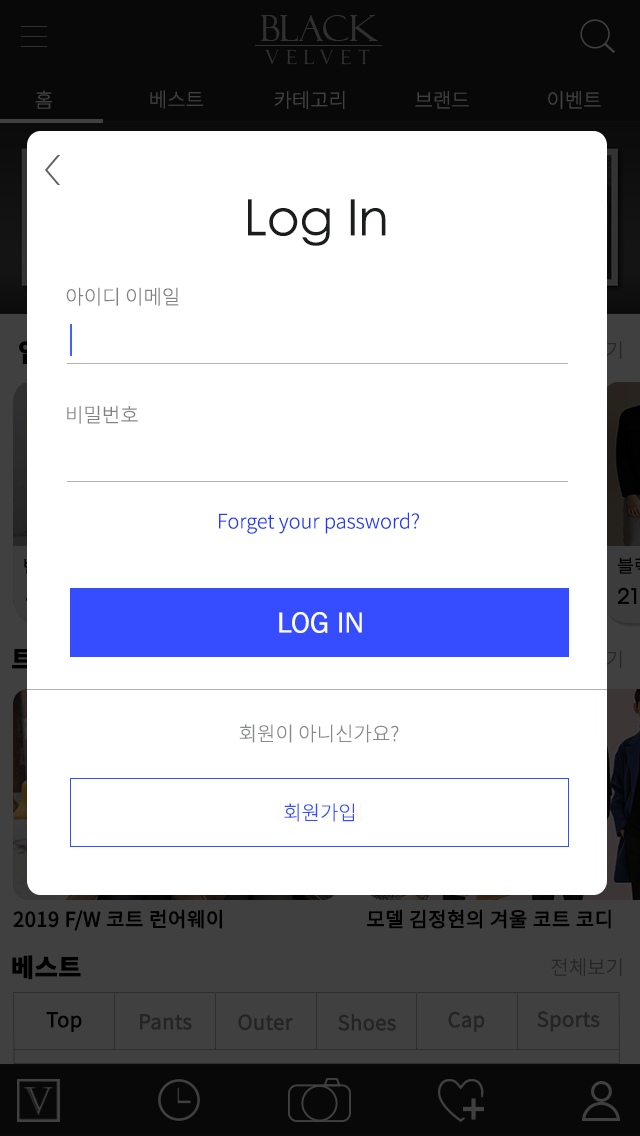
<style>
.page{position:relative;width:640px;height:1136px;background:#ffffff}
.page>*{position:absolute;margin:0}
.t1{font:35.6px "FelixTitlingMT";color:#313030}
.t2{font:19.4px "FelixTitlingMT";letter-spacing:0.4em;color:#313030}
.t3{font:20px "NotoSansCJKkr-Light";color:#404040}
.t4{font:50px "CenturyGothic";color:#1b1c1c}
.t5{font:20px "NotoSansCJKkr-Light";color:#828080}
.t6{font:20px "NotoSansCJKkr-Light";color:#243df7}
.t7{font:30px "FranklinGothic-Book";color:#fbfbfb}
.t8{font:20px "NotoSansCJKkr-Light";color:#858a88}
.t9{font:20px "NotoSansCJKkr-Light";color:#354dfe}
.t10{font:20px "NotoSansCJKkr-Regular";color:#000000;font-weight:bold}
.t11{font:25px "NotoSansCJKkr-Bold";color:#010000;font-weight:bold}
.t12{font:20px "NotoSansCJKkr-Light";color:#252525}
.t13{font:20px "NotoSansCJKkr-DemiLight";color:#000000;font-weight:bold}
.t14{font:20px "NotoSansCJKkr-DemiLight";color:#252424;font-weight:bold}
</style>
<div class="page">
<p class="t1" style="left:261px;top:15px;width:117px;height:26px">BLACK</p>
<p class="t2" style="left:265px;top:49px;width:105px;height:16px">VELVET</p>
<p class="t3" style="left:35px;top:90px;width:17px;height:19px">홈</p>
<p class="t3" style="left:150px;top:90px;width:53px;height:19px">베스트</p>
<p class="t3" style="left:274px;top:91px;width:71px;height:18px">카테고리</p>
<p class="t3" style="left:415px;top:91px;width:54px;height:18px">브랜드</p>
<p class="t3" style="left:548px;top:91px;width:53px;height:18px">이벤트</p>
<p class="t4" style="left:248px;top:199px;width:138px;height:47px">Log In</p>
<p class="t5" style="left:66px;top:287px;width:113px;height:19px">아이디 이메일</p>
<p class="t5" style="left:67px;top:405px;width:71px;height:19px">비밀번호</p>
<p class="t6" style="left:219px;top:512px;width:200px;height:22px">Forget your password?</p>
<p class="t7" style="left:279px;top:612px;width:83px;height:21px">LOG IN</p>
<p class="t8" style="left:239px;top:724px;width:160px;height:19px">회원이 아니신가요?</p>
<p class="t9" style="left:284px;top:803px;width:70px;height:19px">회원가입</p>
<p class="t10" style="left:13px;top:909px;width:209px;height:22px">2019 F/W 코트 런어웨이</p>
<p class="t10" style="left:367px;top:909px;width:244px;height:20px">모델 김정현의 겨울 코트 코디</p>
<p class="t11" style="left:12px;top:955px;width:69px;height:25px">베스트</p>
<p class="t12" style="left:551px;top:958px;width:71px;height:19px">전체보기</p>
<p class="t13" style="left:46px;top:1012px;width:36px;height:20px">Top</p>
<p class="t14" style="left:140px;top:1014px;width:52px;height:16px">Pants</p>
<p class="t14" style="left:238px;top:1014px;width:55px;height:17px">Outer</p>
<p class="t14" style="left:338px;top:1013px;width:58px;height:18px">Shoes</p>
<p class="t14" style="left:448px;top:1011px;width:37px;height:21px">Cap</p>
<p class="t14" style="left:537px;top:1011px;width:63px;height:21px">Sports</p>
</div>
